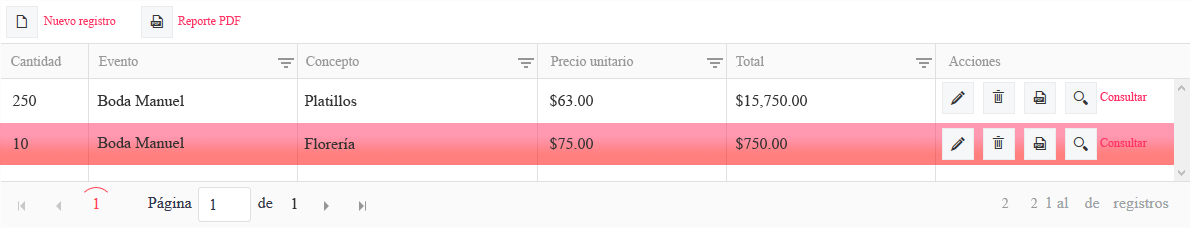
<style>
.page{position:relative;width:1190px;height:228px;background:#ffffff}
.page>*{position:absolute;margin:0}
.t1{font:14px "TimesNewRomanPSMT";color:#999999}
.t2{font:16px "TimesNewRomanPSMT";color:#333333}
</style>
<div class="page">
<p class="t1" style="left:11px;top:56px;width:51px;height:10px">Cantidad</p>
<p class="t1" style="left:98px;top:56px;width:40px;height:10px">Evento</p>
<p class="t1" style="left:306px;top:56px;width:53px;height:13px">Concepto</p>
<p class="t1" style="left:550px;top:56px;width:84px;height:10px">Precio unitario</p>
<p class="t1" style="left:736px;top:56px;width:28px;height:10px">Total</p>
<p class="t1" style="left:948px;top:56px;width:53px;height:10px">Acciones</p>
<p class="t2" style="left:12px;top:95px;width:24px;height:11px">250</p>
<p class="t2" style="left:97px;top:95px;width:87px;height:11px">Boda Manuel</p>
<p class="t2" style="left:304px;top:95px;width:53px;height:11px">Platillos</p>
<p class="t2" style="left:550px;top:94px;width:43px;height:13px">$63.00</p>
<p class="t2" style="left:736px;top:94px;width:71px;height:14px">$15,750.00</p>
<p class="t2" style="left:97px;top:137px;width:87px;height:11px">Boda Manuel</p>
<p class="t2" style="left:550px;top:137px;width:43px;height:13px">$75.00</p>
<p class="t2" style="left:736px;top:137px;width:51px;height:13px">$750.00</p>
<p class="t2" style="left:14px;top:138px;width:14px;height:11px">10</p>
<p class="t2" style="left:304px;top:138px;width:52px;height:11px">Florería</p>
<p class="t2" style="left:292px;top:198px;width:5px;height:11px">1</p>
<p class="t1" style="left:1002px;top:198px;width:7px;height:10px">2</p>
<p class="t1" style="left:1031px;top:198px;width:7px;height:10px">2</p>
</div>
